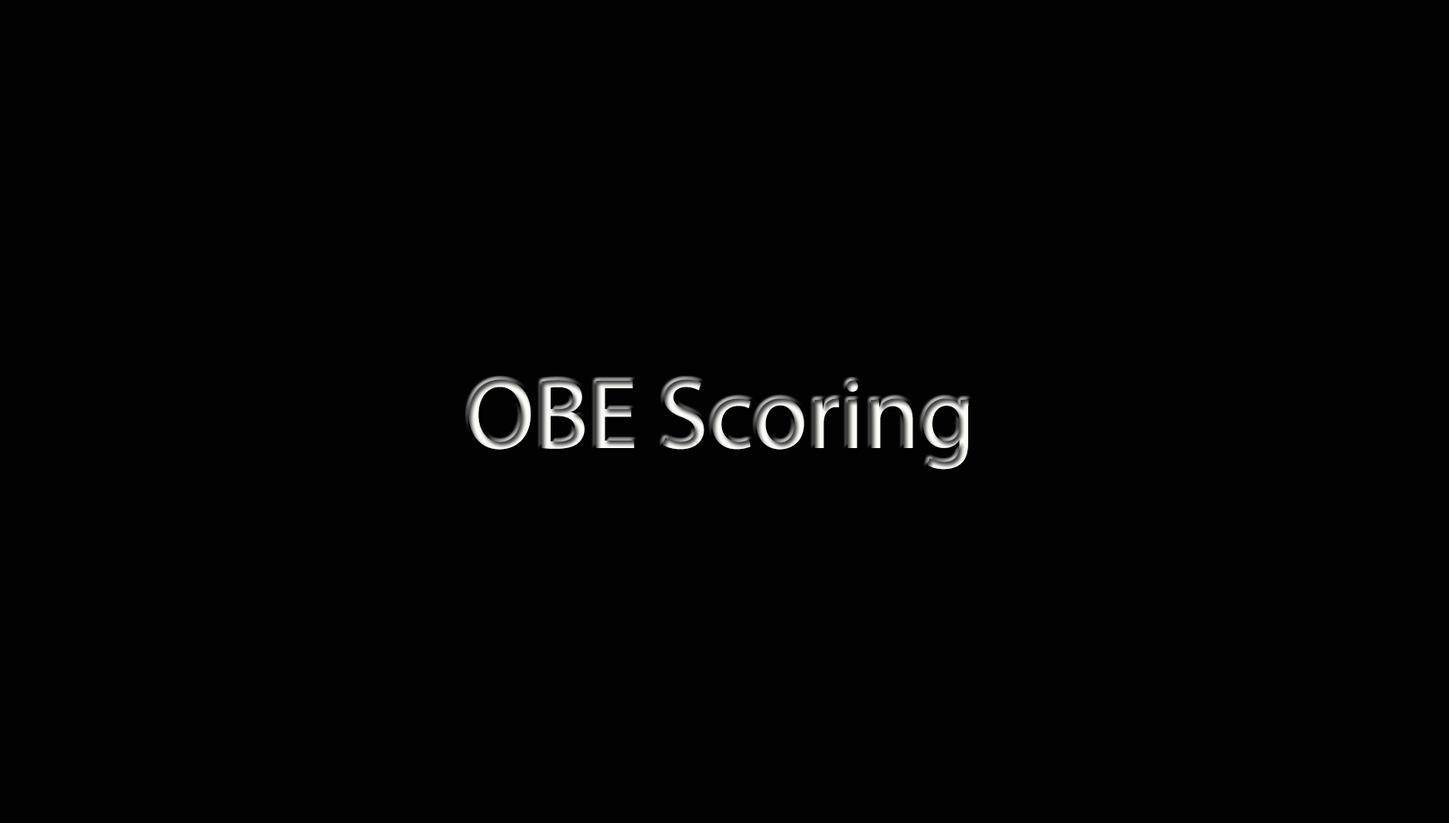
<style>
.page{position:relative;width:1449px;height:823px;background:#020203}
.page>*{position:absolute;margin:0}
.t1{font:99.9px "MyriadPro-Regular"}
</style>
<div class="page">
<p class="t1" style="left:468px;top:379px;width:501px;height:91px">OBE Scoring</p>
</div>
